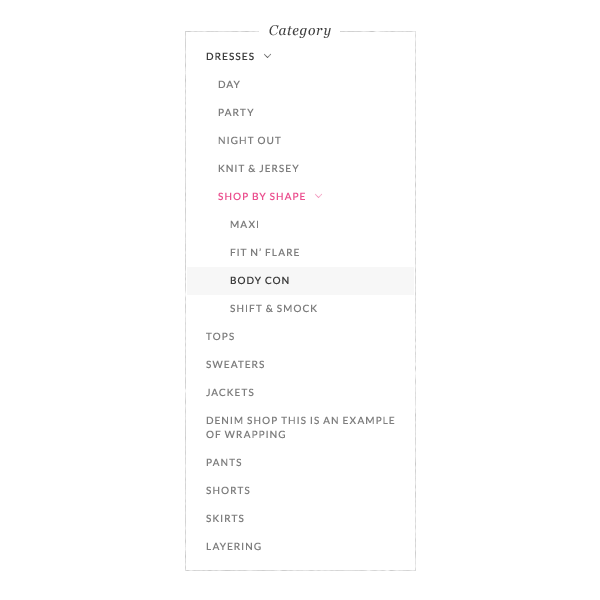
<style>
.page{position:relative;width:600px;height:600px;background:#ffffff}
.page>*{position:absolute;margin:0}
.t1{font:14px "Georgia-Italic";letter-spacing:0.05em;color:#3e3e3e}
.t2{font:10px "Lato-Regular";letter-spacing:0.1em;color:#3e3e3e}
.t3{font:10px/28px "Lato-Regular";letter-spacing:0.1em;color:#7f7f7f}
.t4{font:10px "Lato-Regular";letter-spacing:0.1em;color:#eb5190}
.t5{font:10px/28px "Lato-Regular";letter-spacing:0.1em;color:#7e7e7e}
.t6{font:10px/28px "Lato-Regular";letter-spacing:0.1em;color:#3e3e3e}
.t7{font:10px/14px "Lato-Regular";letter-spacing:0.1em;color:#7f7f7f}
</style>
<div class="page">
<p class="t1" style="left:269px;top:25px;width:62px;height:13px">Category</p>
<p class="t2" style="left:206px;top:52px;width:48px;height:9px">DRESSES</p>
<p class="t3" style="left:218px;top:80px;width:81px;height:93px">DAY<br>PARTY<br>NIGHT OUT<br>KNIT &amp; JERSEY</p>
<p class="t4" style="left:218px;top:192px;width:87px;height:9px">SHOP BY SHAPE</p>
<p class="t5" style="left:230px;top:220px;width:87px;height:93px">MAXI<br>FIT N’ FLARE<br><span class="t6">BODY CON<br></span>SHIFT &amp; SMOCK</p>
<p class="t7" style="left:206px;top:332px;width:189px;height:219px">TOPS<br>SWEATERS<br>JACKETS<br>DENIM SHOP THIS IS AN EXAMPLE<br>OF WRAPPING<br>PANTS<br>SHORTS<br>SKIRTS<br>LAYERING</p>
</div>
